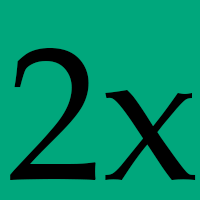
<style>
.page{position:relative;width:200px;height:200px;background:#00a77c}
.page>*{position:absolute;margin:0}
.t1{font:190px "Palatino-Roman";color:#000000}
</style>
<div class="page">
<p class="t1" style="left:10px;top:48px;width:186px;height:132px">2x</p>
</div>
